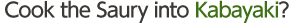
<style>
.page{position:relative;width:294px;height:23px;background:#ffffff}
.page>*{position:absolute;margin:0}
.t1{font:20px "UDShinGoPro-Medium";letter-spacing:-0.04em;color:#3b3935}
.t2{font:20px "UDShinGoPro-Medium";letter-spacing:-0.04em;color:#3e7115}
</style>
<div class="page">
<p class="t1" style="left:5px;top:0px;width:284px;height:23px">Cook the Saury into <span class="t2">Kabayaki</span>?</p>
</div>
